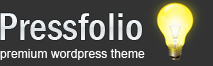
<style>
.page{position:relative;width:213px;height:66px;background:#333333}
.page>*{position:absolute;margin:0}
.t1{font:12px "ArialMT";letter-spacing:0.01em;color:#ffffff}
</style>
<div class="page">
<p class="t1" style="left:0px;top:49px;width:145px;height:11px">premium wordpress theme</p>
</div>
